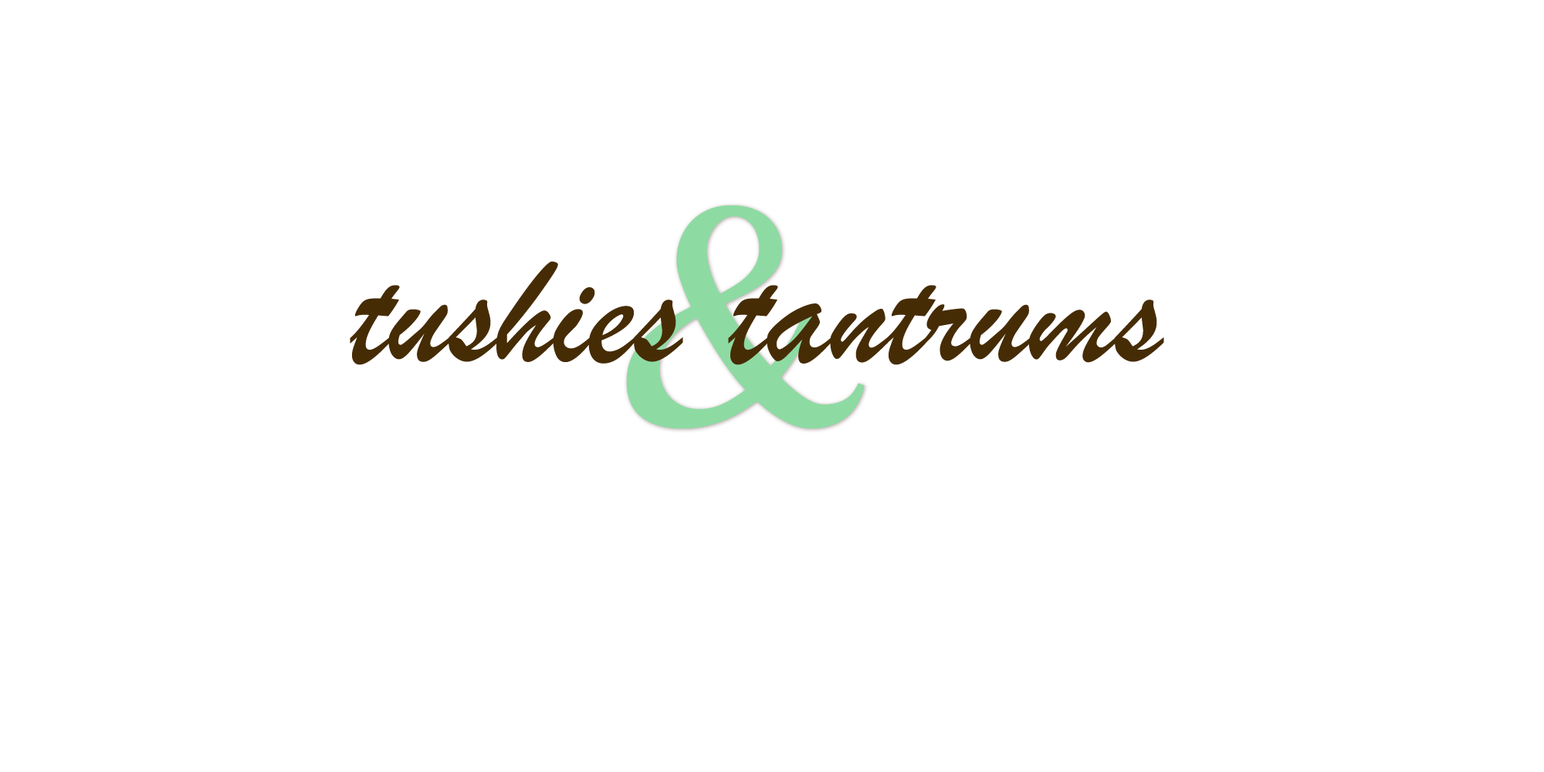
<style>
.page{position:relative;width:1544px;height:772px;background:#ffffff}
.page>*{position:absolute;margin:0}
.t1{font:312.8px "MyanmarMN";color:#8ddba3}
.t2{font:154.4px "BrushScriptMT";color:#462c05}
</style>
<div class="page">
<p class="t1" style="left:626px;top:205px;width:239px;height:224px">&amp;</p>
<p class="t2" style="left:350px;top:261px;width:333px;height:104px">tushies</p>
<p class="t2" style="left:728px;top:285px;width:436px;height:80px">tantrums</p>
</div>
